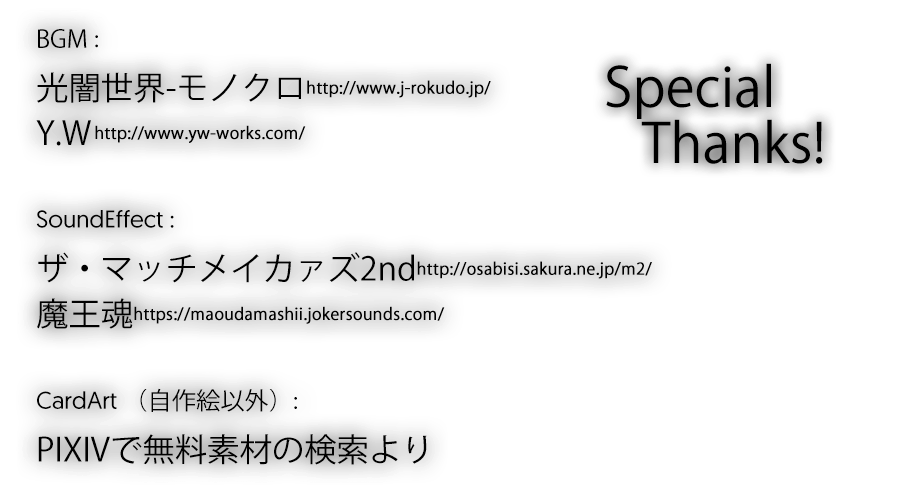
<style>
.page{position:relative;width:900px;height:500px;background:#ffffff}
.page>*{position:absolute;margin:0}
.t1{font:16.2px/45.2px "KozGoPr6N-Regular";color:#000000;font-weight:bold}
.t2{font:24.2px/45.2px "KozGoPr6N-Regular";color:#000000}
.t3{font:24.2px/45.2px "Geomanist-Regular";color:#000000}
.t4{font:32.3px/45.2px "KozGoPr6N-Regular";color:#000000}
.t5{font:54px/56px "KozGoPr6N-Regular";color:#000000}
</style>
<div class="page">
<p class="t1" style="left:36px;top:29px;width:616px;height:436px"><span class="t2">BGM</span><span class="t3"> :<br></span><span class="t4">光闇世界-モノクロ</span>http://www.j-rokudo.jp/ <br><span class="t4">Y.W </span>http://www.yw-works.com/<br><br><span class="t3">SoundEffect :<br></span><span class="t4">ザ・マッチメイカァズ2nd</span>http://osabisi.sakura.ne.jp/m2/<br><span class="t4">魔王魂</span>https://maoudamashii.jokersounds.com/   <br><br><span class="t3">CardArt </span><span class="t2">（自作絵以外）</span><span class="t3">:<br></span><span class="t4">PIXIVで無料素材の検索より</span></p>
<p class="t5" style="left:606px;top:63px;width:217px;height:101px">Special<br>   Thanks!</p>
</div>
